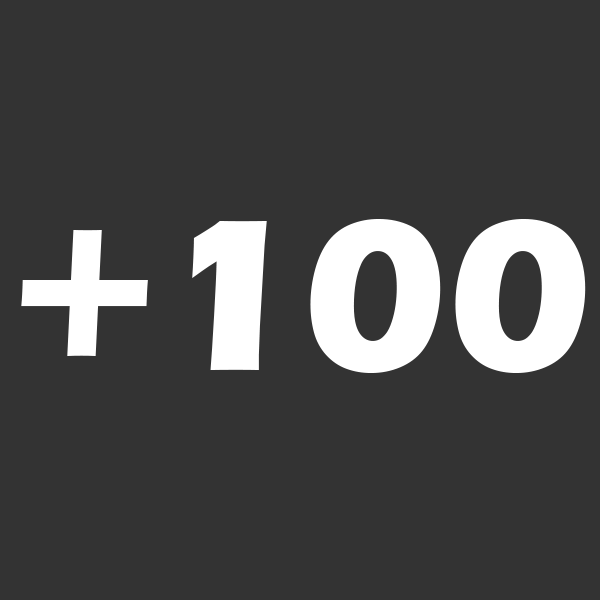
<style>
.page{position:relative;width:600px;height:600px;background:#333333}
.page>*{position:absolute;margin:0}
.t1{font:223px "ErasITC-Bold";color:#ffffff}
</style>
<div class="page">
<p class="t1" style="left:21px;top:219px;width:565px;height:154px">+100</p>
</div>
